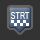
<style>
.page{position:relative;width:40px;height:40px;background:#333333}
.page>*{position:absolute;margin:0}
.t1{font:9px "MicrosoftSansSerif";color:#fefefe;scale:0.79 1}
</style>
<div class="page">
<p class="t1" style="left:10px;top:12px;width:20px;height:7px">STRT</p>
</div>
